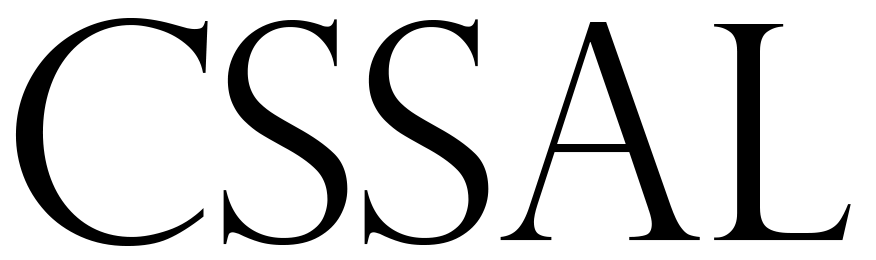
<style>
.page{position:relative;width:876px;height:260px;background:#ffffff}
.page>*{position:absolute;margin:0}
.t1{font:300px "PerpetuaTitlingMT-Light";color:#000000}
</style>
<div class="page">
<p class="t1" style="left:15px;top:18px;width:836px;height:228px">CSSAL</p>
</div>
